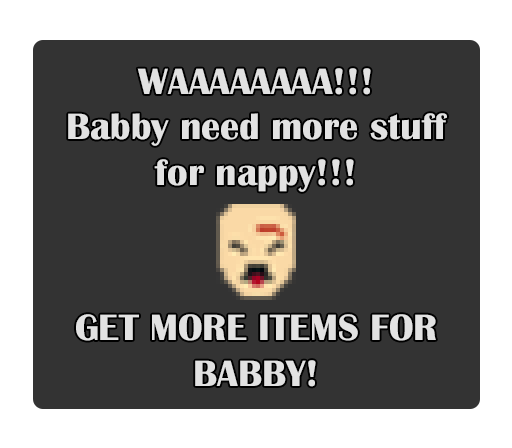
<style>
.page{position:relative;width:512px;height:448px;background:#333333}
.page>*{position:absolute;margin:0}
.t1{font:38px "BritannicBold";color:#e2e2e2}
</style>
<div class="page">
<p class="t1" style="left:68px;top:68px;width:379px;height:319px;text-align:center">WAAAAAAAA!!! <br>Babby need more stuff for nappy!!! <br><br><br>GET MORE ITEMS FOR BABBY!</p>
</div>
